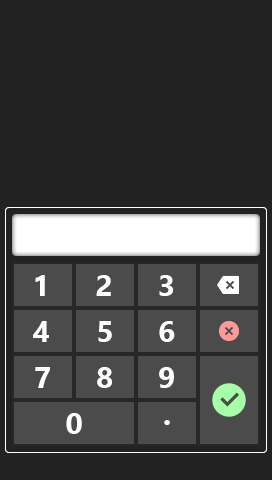
<style>
.page{position:relative;width:272px;height:480px;background:#222222}
.page>*{position:absolute;margin:0}
.t1{font:30px "SegoeUI-Bold";color:#ffffff}
</style>
<div class="page">
<p class="t1" style="left:35px;top:275px;width:10px;height:21px">1</p>
<p class="t1" style="left:35px;top:275px;width:10px;height:21px">1</p>
<p class="t1" style="left:96px;top:275px;width:15px;height:21px">2</p>
<p class="t1" style="left:96px;top:275px;width:15px;height:21px">2</p>
<p class="t1" style="left:159px;top:275px;width:15px;height:21px">3</p>
<p class="t1" style="left:159px;top:275px;width:15px;height:21px">3</p>
<p class="t1" style="left:33px;top:321px;width:16px;height:21px">4</p>
<p class="t1" style="left:33px;top:321px;width:16px;height:21px">4</p>
<p class="t1" style="left:98px;top:321px;width:14px;height:21px">5</p>
<p class="t1" style="left:98px;top:321px;width:14px;height:21px">5</p>
<p class="t1" style="left:159px;top:321px;width:16px;height:21px">6</p>
<p class="t1" style="left:159px;top:321px;width:16px;height:21px">6</p>
<p class="t1" style="left:35px;top:367px;width:15px;height:21px">7</p>
<p class="t1" style="left:35px;top:367px;width:15px;height:21px">7</p>
<p class="t1" style="left:97px;top:367px;width:16px;height:21px">8</p>
<p class="t1" style="left:97px;top:367px;width:16px;height:21px">8</p>
<p class="t1" style="left:159px;top:367px;width:15px;height:21px">9</p>
<p class="t1" style="left:159px;top:367px;width:15px;height:21px">9</p>
<p class="t1" style="left:66px;top:413px;width:16px;height:21px">0</p>
<p class="t1" style="left:164px;top:420px;width:6px;height:5px">.</p>
<p class="t1" style="left:164px;top:420px;width:6px;height:5px">.</p>
</div>
